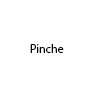
<style>
.page{position:relative;width:100px;height:100px;background:#ffffff}
.page>*{position:absolute;margin:0}
.t1{font:12px "MyriadPro-Regular";color:#000000}
</style>
<div class="page">
<p class="t1" style="left:30px;top:44px;width:34px;height:9px">Pinche</p>
</div>
